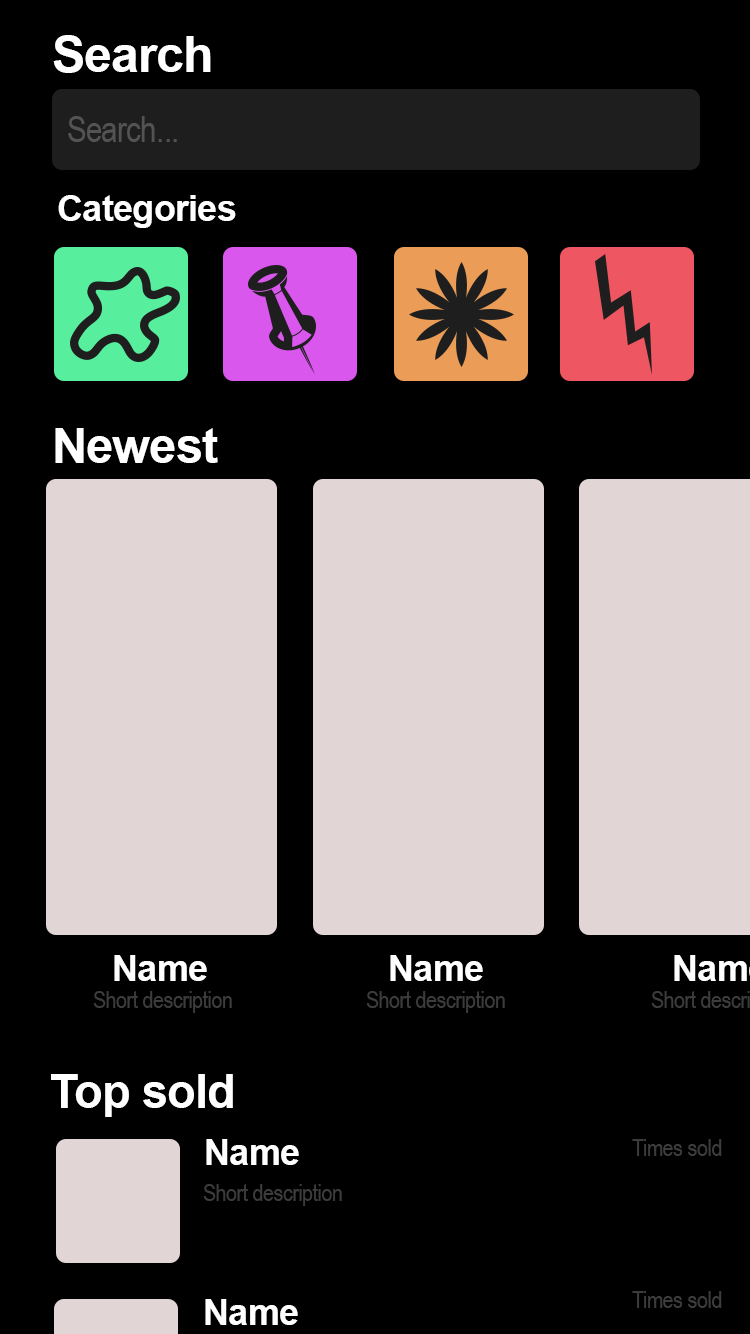
<style>
.page{position:relative;width:750px;height:1334px;background:#000000}
.page>*{position:absolute;margin:0}
.t1{font:50px "Arial-BoldMT";letter-spacing:-0.02em;color:#ffffff}
.t2{font:36px "ArialNarrow";letter-spacing:-0.02em;color:#545353}
.t3{font:36px "Arial-BoldMT";letter-spacing:-0.02em;color:#ffffff}
.t4{font:48.9px "Arial-BoldMT";letter-spacing:-0.02em;color:#ffffff}
.t5{font:24px "ArialNarrow";letter-spacing:-0.02em;color:#3c3c3c}
.t6{font:47px "Arial-BoldMT";letter-spacing:-0.02em;color:#ffffff}
</style>
<div class="page">
<p class="t1" style="left:53px;top:35px;width:158px;height:38px">Search</p>
<p class="t2" style="left:68px;top:116px;width:109px;height:26px">Search...</p>
<p class="t3" style="left:58px;top:195px;width:178px;height:33px">Categories</p>
<p class="t4" style="left:55px;top:428px;width:163px;height:35px">Newest</p>
<p class="t3" style="left:114px;top:955px;width:93px;height:26px">Name</p>
<p class="t3" style="left:390px;top:955px;width:93px;height:26px">Name</p>
<p class="t5" style="left:93px;top:991px;width:139px;height:22px">Short description</p>
<p class="t5" style="left:366px;top:991px;width:139px;height:22px">Short description</p>
<p class="t6" style="left:51px;top:1074px;width:182px;height:43px">Top sold</p>
<p class="t3" style="left:206px;top:1139px;width:93px;height:26px">Name</p>
<p class="t5" style="left:632px;top:1139px;width:90px;height:17px">Times sold</p>
<p class="t5" style="left:203px;top:1184px;width:139px;height:22px">Short description</p>
<p class="t3" style="left:205px;top:1299px;width:93px;height:26px">Name</p>
<p class="t5" style="left:632px;top:1291px;width:90px;height:17px">Times sold</p>
</div>
